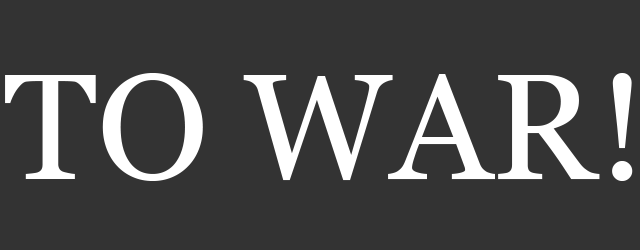
<style>
.page{position:relative;width:640px;height:250px;background:#333333}
.page>*{position:absolute;margin:0}
.t1{font:150px "Georgia";color:#ffffff}
</style>
<div class="page">
<p class="t1" style="left:5px;top:73px;width:628px;height:108px">TO WAR!</p>
</div>
